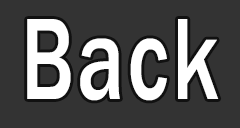
<style>
.page{position:relative;width:240px;height:128px;background:#333333}
.page>*{position:absolute;margin:0}
.t1{font:120px "FranklinGothic-Medium";letter-spacing:0.04em;color:#ffffff;scale:0.72 1}
</style>
<div class="page">
<p class="t1" style="left:27px;top:19px;width:192px;height:82px">Back</p>
</div>
